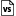
<style>
.page{position:relative;width:16px;height:16px;background:#ffffff}
.page>*{position:absolute;margin:0}
.t1{font:6.9px "MyriadPro-Bold";color:#000000}
</style>
<div class="page">
<p class="t1" style="left:3px;top:7px;width:8px;height:5px">VS</p>
</div>
